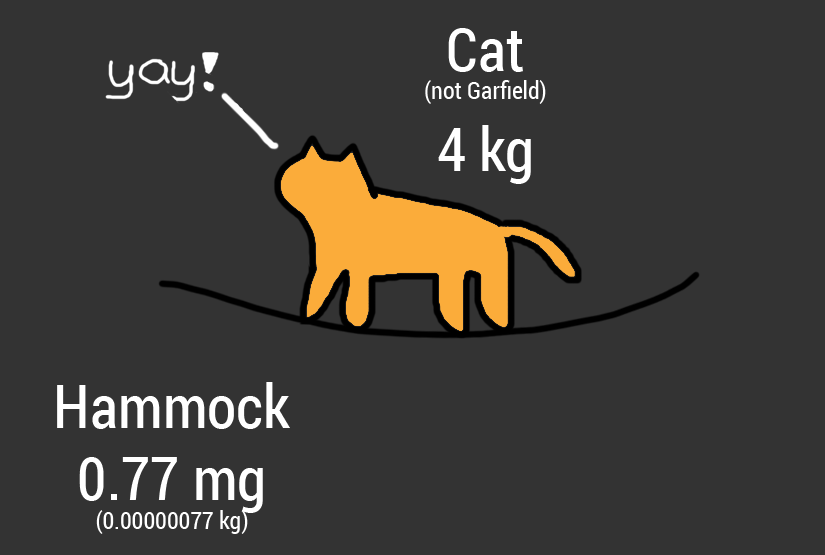
<style>
.page{position:relative;width:825px;height:555px;background:#333333}
.page>*{position:absolute;margin:0}
.t1{font:24px "RobotoCondensed-Regular";color:#ffffff}
.t2{font:60px "RobotoCondensed-Regular";color:#ffffff}
</style>
<div class="page">
<p class="t1" style="left:425px;top:28px;width:121px;height:156px;text-align:center"><span class="t2">Cat<br></span>(not Garfield)<br><span class="t2">4 kg</span></p>
<p class="t2" style="left:57px;top:382px;width:233px;height:152px;text-align:center">Hammock<br>0.77 mg<br><span class="t1">(0.00000077 kg)</span></p>
</div>
